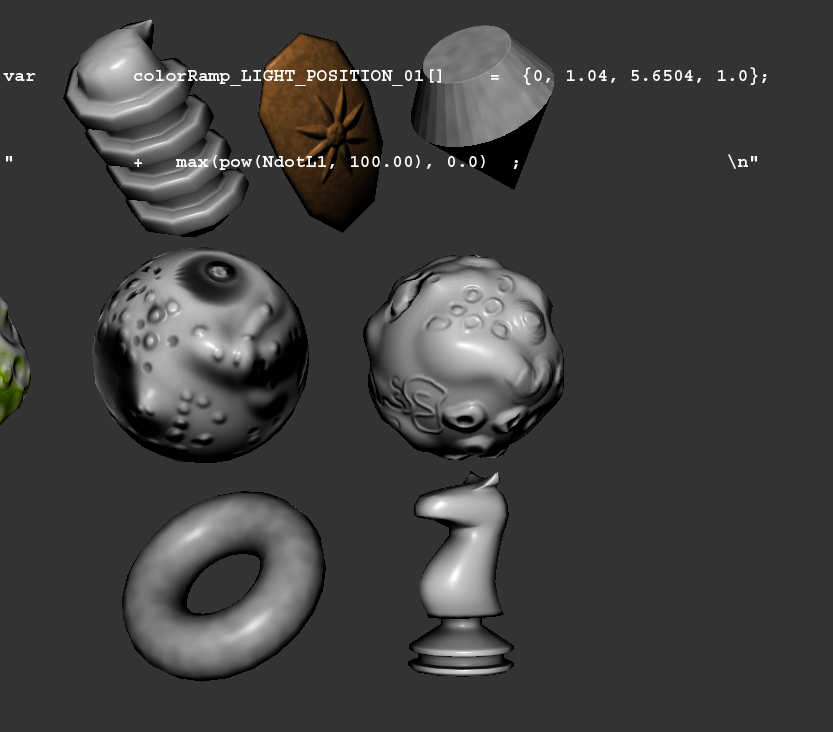
<style>
.page{position:relative;width:833px;height:732px;background:#333333}
.page>*{position:absolute;margin:0}
.t1{font:18px "Courier-Bold";color:#ffffff}
</style>
<div class="page">
<p class="t1" style="left:3px;top:67px;width:764px;height:103px">var         colorRamp_LIGHT_POSITION_01[]    =  {0, 1.04, 5.6504, 1.0};<br><br><br><br>"           +   max(pow(NdotL1, 100.00), 0.0)  ;                   \n"</p>
</div>
